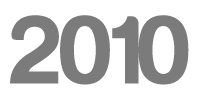
<style>
.page{position:relative;width:200px;height:100px;background:#ffffff}
.page>*{position:absolute;margin:0}
.t1{font:100px "Harabara-Bold";color:#7b7b7b}
</style>
<div class="page">
<p class="t1" style="left:10px;top:15px;width:179px;height:70px">2010</p>
</div>
